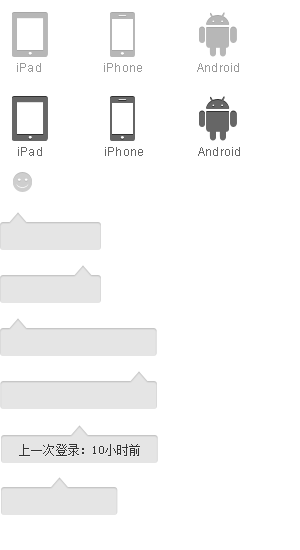
<style>
.page{position:relative;width:300px;height:550px;background:#ffffff}
.page>*{position:absolute;margin:0}
.t1{font:12px "ArialMT";letter-spacing:0.02em;color:#999999}
.t2{font:12px "ArialMT";letter-spacing:0.02em;color:#666666}
.t3{font:12px "SimSun";letter-spacing:0.02em;color:#333333}
</style>
<div class="page">
<p class="t1" style="left:17px;top:63px;width:24px;height:9px">iPad</p>
<p class="t1" style="left:104px;top:63px;width:38px;height:9px">iPhone</p>
<p class="t1" style="left:197px;top:63px;width:42px;height:9px">Android</p>
<p class="t2" style="left:18px;top:147px;width:24px;height:9px">iPad</p>
<p class="t2" style="left:105px;top:147px;width:38px;height:9px">iPhone</p>
<p class="t2" style="left:198px;top:147px;width:42px;height:9px">Android</p>
<p class="t3" style="left:19px;top:444px;width:121px;height:12px">上一次登录：10小时前</p>
</div>
